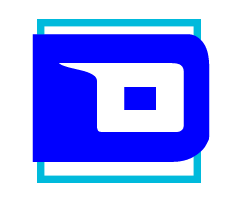
<style>
.page{position:relative;width:241px;height:209px;background:#ffffff}
.page>*{position:absolute;margin:0}
.t1{font:203.7px "Interdiction";color:#0000ff}
</style>
<div class="page">
<p class="t1" style="left:32px;top:34px;width:178px;height:128px">D</p>
</div>
